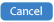
<style>
.page{position:relative;width:54px;height:22px;background:#3c80c7}
.page>*{position:absolute;margin:0}
.t1{font:12.1px "Candara";color:#ffffff;scale:0.97 1}
</style>
<div class="page">
<p class="t1" style="left:10px;top:6px;width:32px;height:10px">Cancel</p>
</div>
